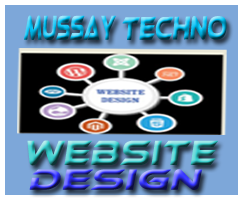
<style>
.page{position:relative;width:244px;height:206px}
.page>*{position:absolute;margin:0}
.t1{font:34.7px "EthnocentricRg-Regular";letter-spacing:0.005em;font-weight:bold;font-style:italic;scale:0.4 1}
.t2{font:33.2px "EthnocentricRg-Regular";letter-spacing:0.005em;font-weight:bold;font-style:italic;scale:0.55 1}
.t3{font:35.8px "EthnocentricRg-Regular";letter-spacing:0.005em;font-weight:bold;font-style:italic;scale:0.84 1}
.t4{font:29.5px "EthnocentricRg-Regular";letter-spacing:0.005em;font-weight:bold;font-style:italic;scale:1.13 1}
</style>
<div class="page">
<p class="t1" style="left:24px;top:15px;width:92px;height:25px">mussay</p>
<p class="t2" style="left:122px;top:16px;width:105px;height:24px;rotate:-1deg">techno</p>
<p class="t3" style="left:27px;top:140px;width:191px;height:26px">website</p>
<p class="t4" style="left:29px;top:169px;width:173px;height:21px">design</p>
</div>
